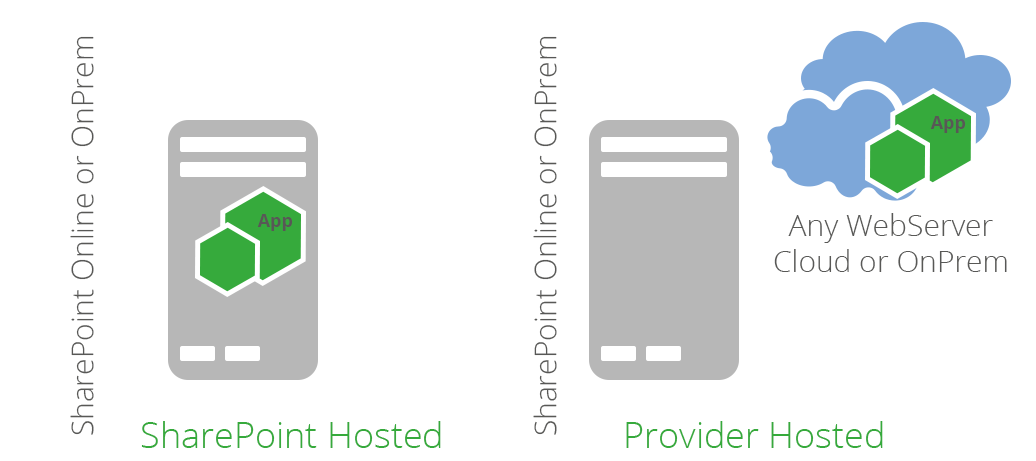
<style>
.page{position:relative;width:1036px;height:461px;background:#ffffff}
.page>*{position:absolute;margin:0}
.t1{font:30px "OpenSans-Light";color:#585856}
.t2{font:18px "OpenSans-Bold";color:#585856}
.t3{font:36px "OpenSans-Light";color:#36aa3c}
</style>
<div class="page">
<p class="t1" style="left:70px;top:36px;width:24px;height:399px;rotate:-90deg">SharePoint Online or OnPrem</p>
<p class="t1" style="left:533px;top:36px;width:24px;height:399px;rotate:-90deg">SharePoint Online or OnPrem</p>
<p class="t2" style="left:930px;top:116px;width:36px;height:17px">App</p>
<p class="t2" style="left:257px;top:214px;width:36px;height:17px">App</p>
<p class="t1" style="left:774px;top:213px;width:233px;height:59px;text-align:center">Any WebServer<br>Cloud or OnPrem</p>
<p class="t3" style="left:141px;top:421px;width:300px;height:27px">SharePoint Hosted</p>
<p class="t3" style="left:626px;top:421px;width:257px;height:27px">Provider Hosted</p>
</div>
